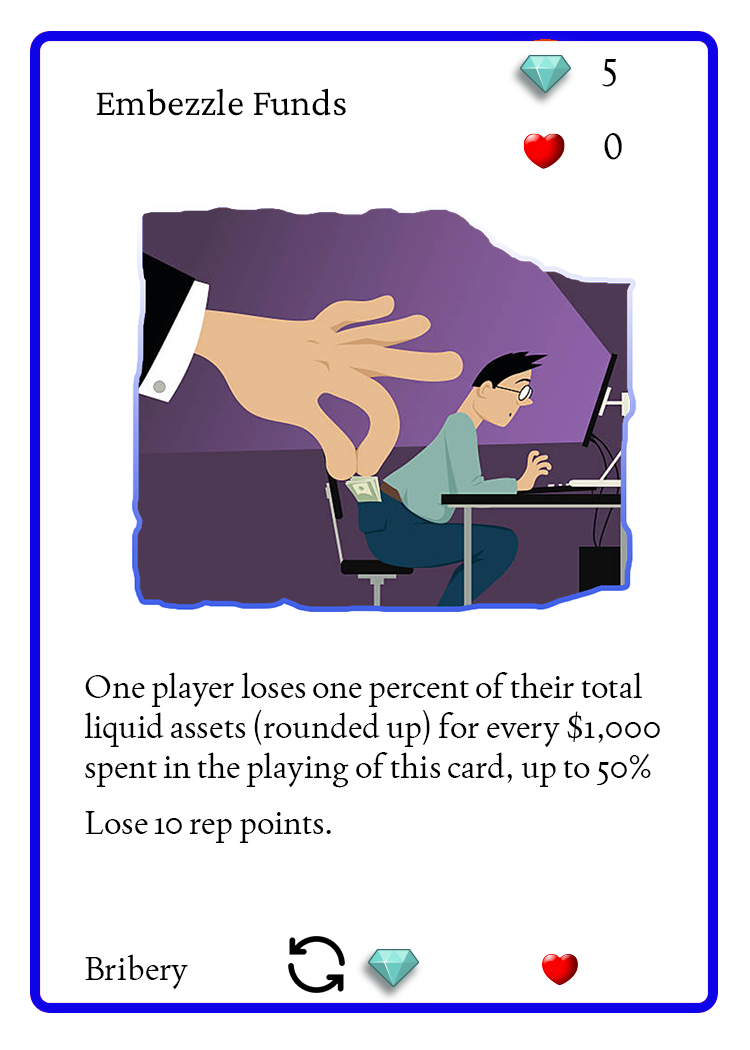
<style>
.page{position:relative;width:750px;height:1050px;background:#ffffff}
.page>*{position:absolute;margin:0}
.t1{font:37.5px "Joan-Regular";color:#000000;text-transform:uppercase}
.t2{font:38.9px "CrimsonPro-Regular";color:#000000}
.t3{font:33.3px "Joan-Regular";color:#000000}
</style>
<div class="page">
<p class="t1" style="left:602px;top:59px;width:14px;height:28px">5</p>
<p class="t2" style="left:96px;top:88px;width:250px;height:28px">Embezzle Funds</p>
<p class="t1" style="left:604px;top:133px;width:18px;height:27px">0</p>
<p class="t3" style="left:84px;top:672px;width:576px;height:171px">One player loses one percent of their total liquid assets (rounded up) for every $1,000 spent in the playing of this card, up to 50%<br>Lose 10 rep points.</p>
<p class="t3" style="left:85px;top:954px;width:103px;height:36px">Bribery</p>
</div>
